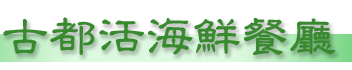
<style>
.page{position:relative;width:352px;height:70px;background:#ffffff}
.page>*{position:absolute;margin:0}
.t1{font:48px "HanWangLiSuMedium";color:#39892f}
</style>
<div class="page">
<p class="t1" style="left:3px;top:17px;width:333px;height:39px">古都活海鮮餐廳</p>
</div>
